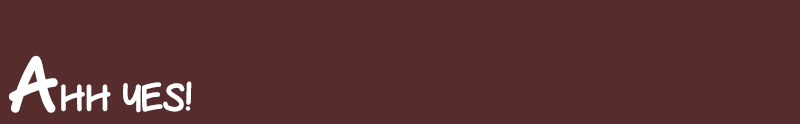
<style>
.page{position:relative;width:800px;height:124px;background:#562d2c}
.page>*{position:absolute;margin:0}
.t1{font:36px "The-Urban-Way";color:#ffffff}
.t2{font:72px "The-Urban-Way";color:#ffffff}
</style>
<div class="page">
<p class="t1" style="left:9px;top:55px;width:183px;height:58px"><span class="t2">A</span>hh Yes!</p>
</div>
